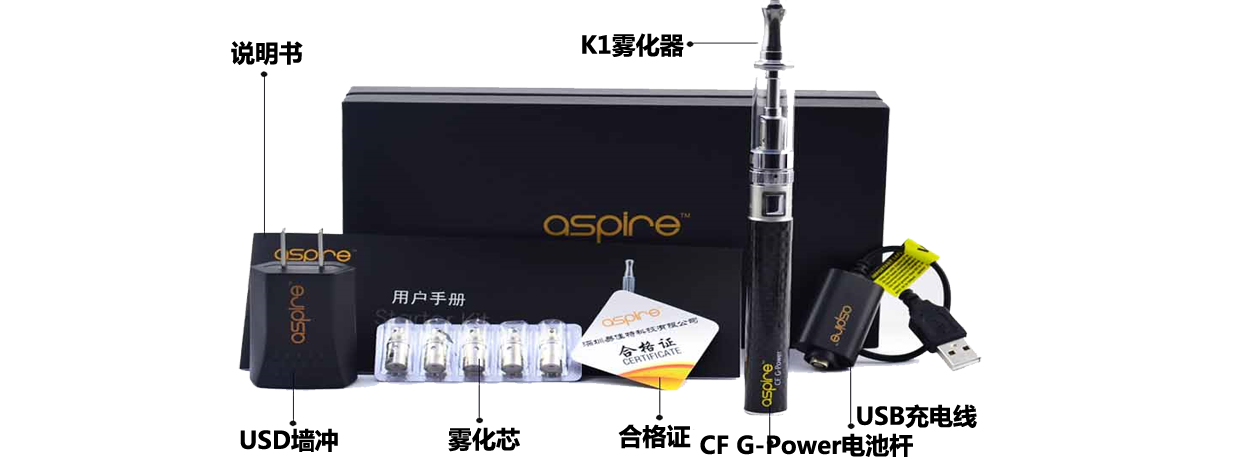
<style>
.page{position:relative;width:1243px;height:459px;background:#ffffff}
.page>*{position:absolute;margin:0}
.t1{font:24px "MicrosoftYaHei-Bold";color:#000000}
</style>
<div class="page">
<p class="t1" style="left:231px;top:41px;width:72px;height:25px">说明书</p>
<p class="t1" style="left:582px;top:33px;width:102px;height:24px">K1雾化器</p>
<p class="t1" style="left:857px;top:404px;width:120px;height:24px">USB充电线</p>
<p class="t1" style="left:618px;top:424px;width:73px;height:25px">合格证</p>
<p class="t1" style="left:240px;top:428px;width:98px;height:24px">USD墙冲</p>
<p class="t1" style="left:448px;top:427px;width:72px;height:25px">雾化芯</p>
<p class="t1" style="left:700px;top:433px;width:213px;height:24px">CF G-Power电池杆</p>
</div>
